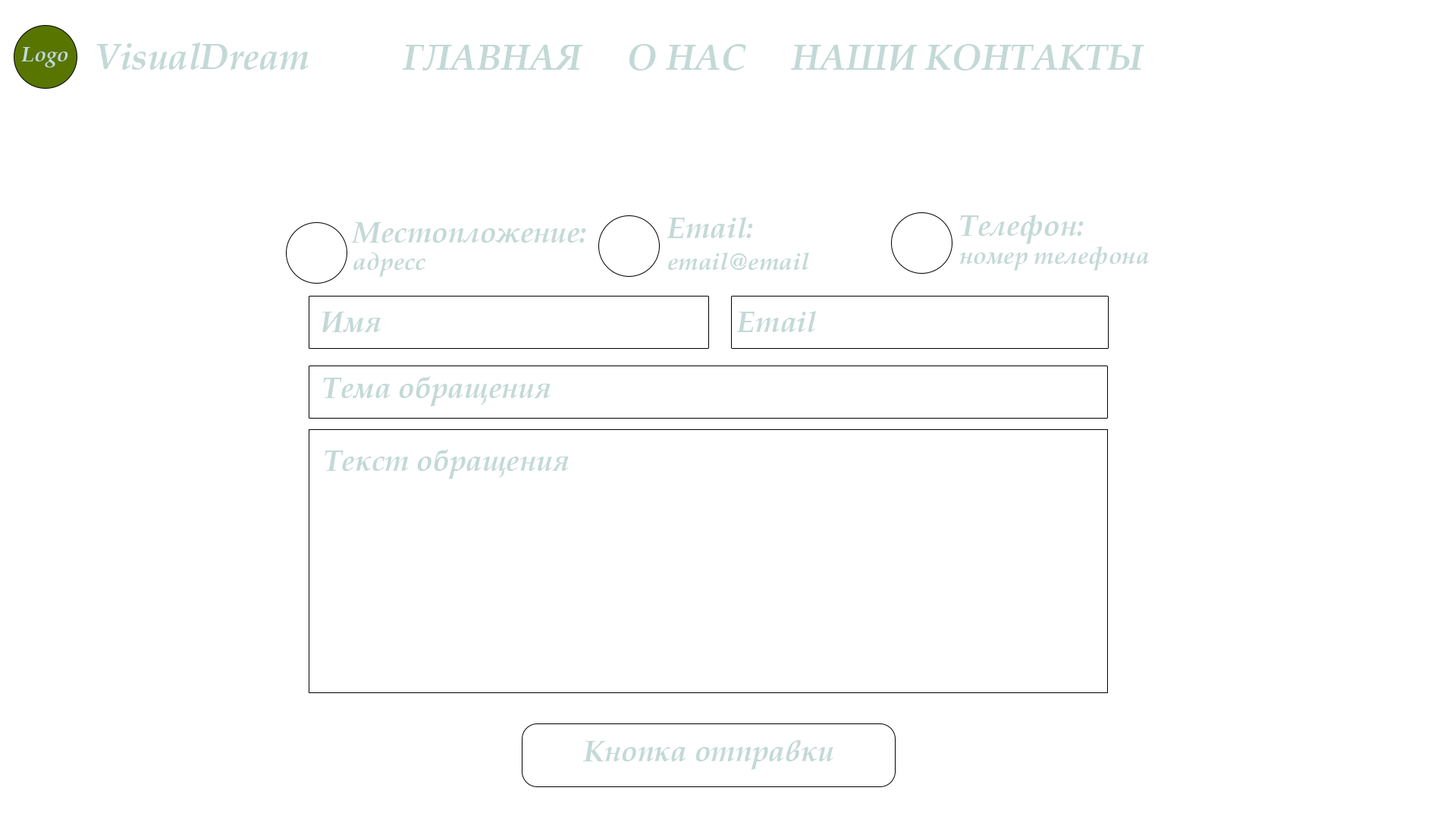
<style>
.page{position:relative;width:1456px;height:819px;background:#ffffff}
.page>*{position:absolute;margin:0}
.t1{font:21.2px "BookAntiqua-BoldItalic";color:#c3d9d6}
.t2{font:36.4px "BookAntiqua-BoldItalic";color:#c3d9d6}
.t3{font:29.6px "BookAntiqua-BoldItalic";color:#c3d9d6}
.t4{font:24.3px "BookAntiqua-BoldItalic";color:#c3d9d6}
</style>
<div class="page">
<p class="t1" style="left:21px;top:47px;width:47px;height:20px">Logo</p>
<p class="t2" style="left:97px;top:42px;width:212px;height:28px">VisualDream</p>
<p class="t2" style="left:403px;top:44px;width:741px;height:27px">ГЛАВНАЯ     О НАС     НАШИ КОНТАКТЫ</p>
<p class="t3" style="left:667px;top:217px;width:86px;height:21px">Email:</p>
<p class="t3" style="left:960px;top:215px;width:124px;height:29px">Телефон:</p>
<p class="t3" style="left:351px;top:222px;width:235px;height:21px">Местопложение:</p>
<p class="t4" style="left:353px;top:253px;width:73px;height:24px">адресс</p>
<p class="t4" style="left:668px;top:253px;width:141px;height:17px">email@email</p>
<p class="t4" style="left:959px;top:246px;width:190px;height:25px">номер телефона</p>
<p class="t3" style="left:322px;top:312px;width:59px;height:20px">Имя</p>
<p class="t3" style="left:736px;top:311px;width:80px;height:21px">Email</p>
<p class="t3" style="left:323px;top:376px;width:228px;height:30px">Тема обращения</p>
<p class="t3" style="left:325px;top:449px;width:244px;height:30px">Текст обращения</p>
<p class="t3" style="left:582px;top:740px;width:251px;height:30px">Кнопка отправки</p>
</div>
